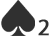
<style>
.page{position:relative;width:52px;height:36px;background:#ffffff}
.page>*{position:absolute;margin:0}
.t1{font:23.4px "MyriadPro-Regular";letter-spacing:-0.1em;color:#303030;font-weight:bold}
</style>
<div class="page">
<p class="t1" style="left:38px;top:19px;width:11px;height:17px">2</p>
</div>
